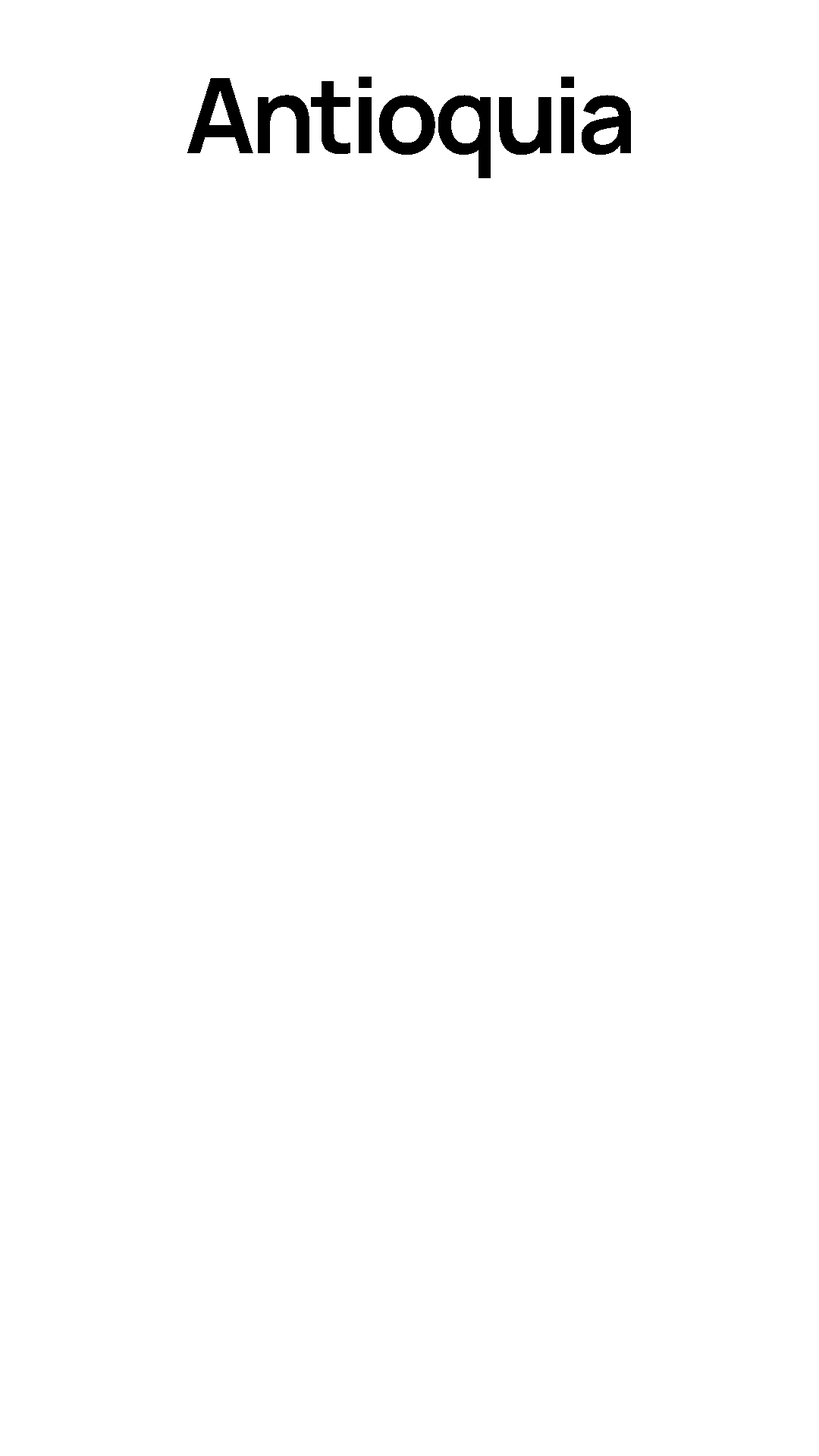
<style>
.page{position:relative;width:819px;height:1456px;background:#ffffff}
.page>*{position:absolute;margin:0}
.t1{font:104.5px "Manrope-Bold";letter-spacing:-0.05em;color:#000000}
</style>
<div class="page">
<p class="t1" style="left:187px;top:77px;width:444px;height:101px">Antioquia</p>
</div>
